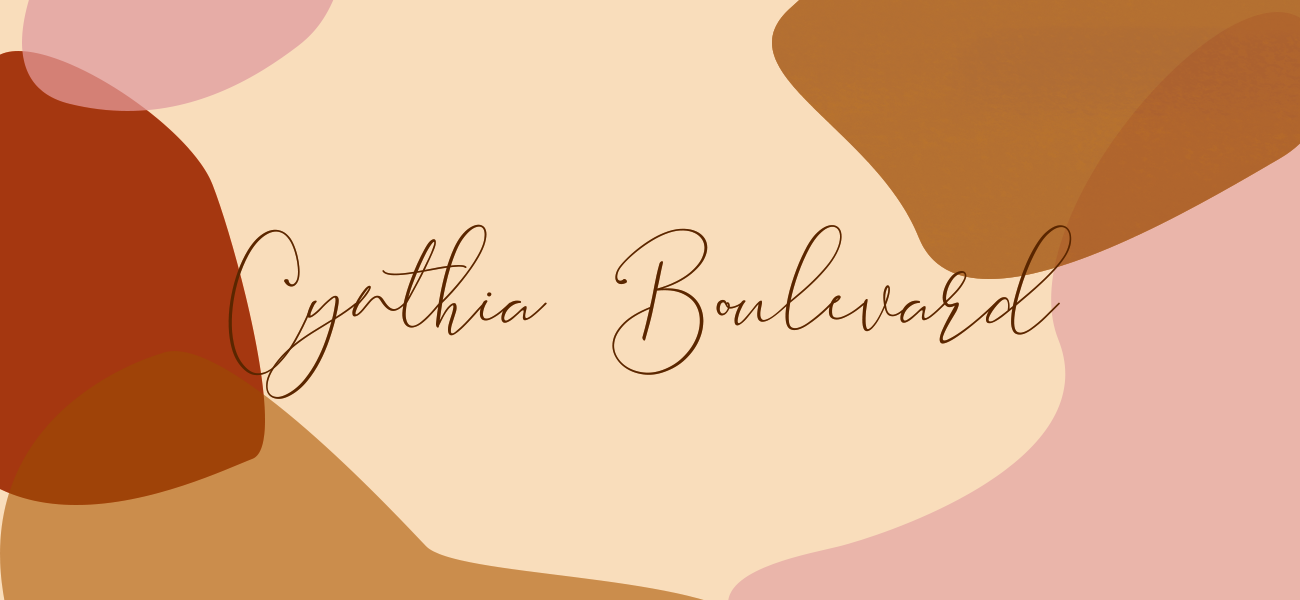
<style>
.page{position:relative;width:1300px;height:600px;background:#f9ddbb}
.page>*{position:absolute;margin:0}
.t1{font:150px "BrookeSmithScript";color:#592600}
</style>
<div class="page">
<p class="t1" style="left:228px;top:224px;width:844px;height:175px">Cynthia  Boulevard</p>
</div>
